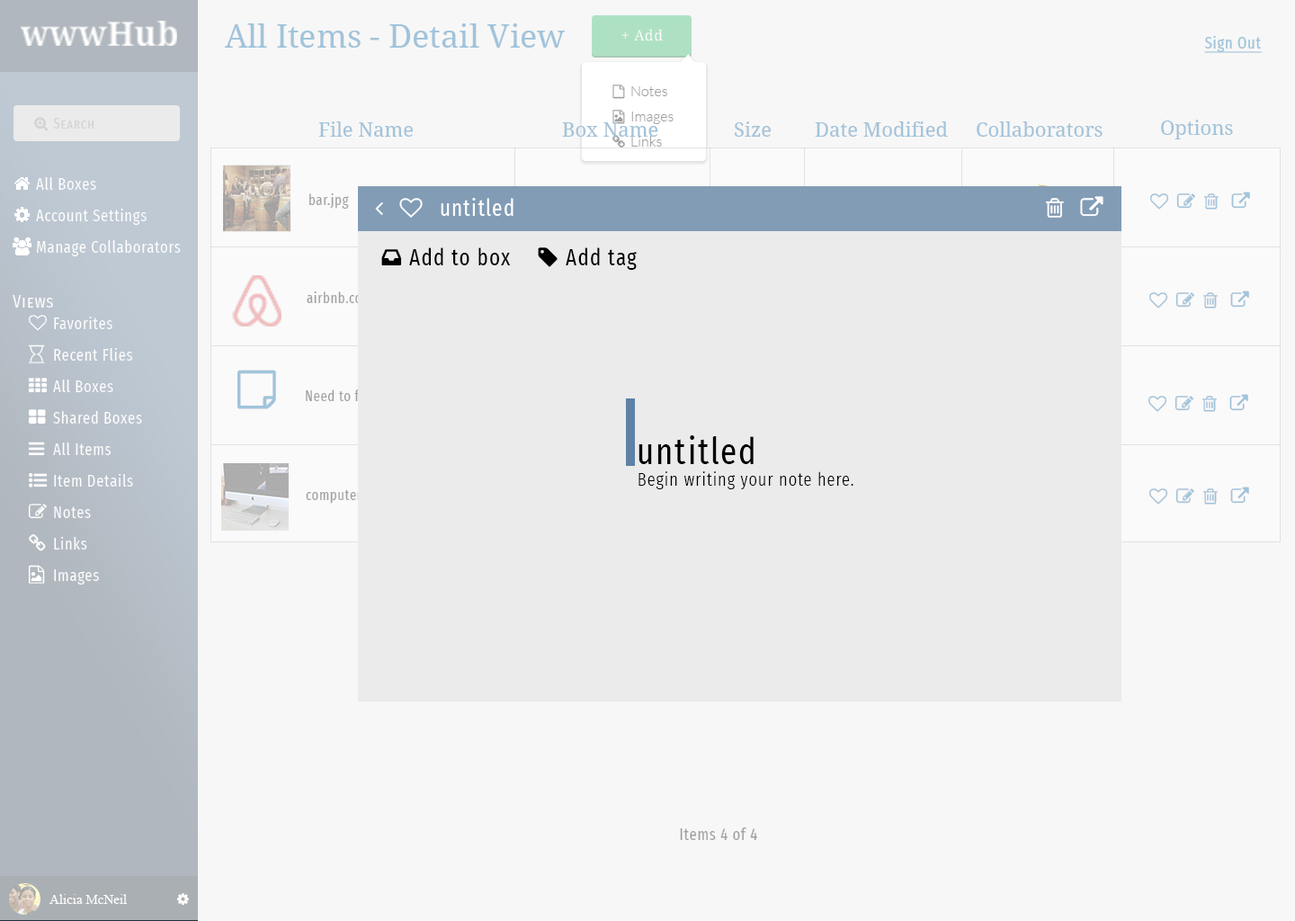
<style>
.page{position:relative;width:1295px;height:921px;background:#f7f7f7}
.page>*{position:absolute;margin:0}
.t1{font:32.4px "DroidSerif";color:#9fc4dc}
.t2{font:14.4px "DroidSerif";letter-spacing:0.04em;color:#ffffff}
.t3{font:14.4px/25.2px "Lato-Light";color:#9f9f9f}
.t4{font:19.8px "DroidSerif";color:#9fc4dc}
.t5{font:14.4px "FiraSansExtraCondensed-Regular";letter-spacing:0.04em;color:#9f9f9f}
.t6{font:22.5px "FiraSansExtraCondensed-Regular";letter-spacing:0.05em;color:#ffffff}
.t7{font:22.5px "FiraSansExtraCondensed-Regular";letter-spacing:0.05em;color:#000000}
.t8{font:14.4px "FiraSansExtraCondensed-Regular";letter-spacing:0.04em}
.t9{font:36px "FiraSansExtraCondensed-Regular";letter-spacing:0.05em;color:#000000}
.t10{font:18px "FiraSansExtraCondensed-Light";letter-spacing:0.05em;color:#000000}
.t11{font:16.2px "FiraSansExtraCondensed-Regular";letter-spacing:0.04em;color:#9f9f9f}
.t12{font:13.5px "TimesNewRomanPSMT";color:#ffffff}
</style>
<div class="page">
<p class="t1" style="left:225px;top:23px;width:340px;height:25px">All Items - Detail View</p>
<p class="t2" style="left:621px;top:29px;width:42px;height:12px">+ Add</p>
<p class="t3" style="left:631px;top:86px;width:43px;height:61px">Notes<br>Images<br>Links</p>
<p class="t4" style="left:318px;top:121px;width:95px;height:16px">File Name</p>
<p class="t4" style="left:562px;top:122px;width:96px;height:15px">Box Name</p>
<p class="t4" style="left:734px;top:121px;width:37px;height:16px">Size</p>
<p class="t4" style="left:815px;top:121px;width:133px;height:16px">Date Modified</p>
<p class="t4" style="left:977px;top:121px;width:125px;height:16px">Collaborators</p>
<p class="t4" style="left:1161px;top:120px;width:72px;height:19px">Options</p>
<p class="t5" style="left:309px;top:193px;width:40px;height:16px">bar.jpg</p>
<p class="t6" style="left:441px;top:198px;width:72px;height:18px">untitled</p>
<p class="t7" style="left:409px;top:247px;width:102px;height:18px">Add to box</p>
<p class="t7" style="left:566px;top:247px;width:71px;height:23px">Add tag</p>
<p class="t5" style="left:307px;top:291px;width:65px;height:12px">airbnb.com</p>
<p class="t8" style="left:306px;top:389px;width:137px;height:16px">Need to find a designer</p>
<p class="t9" style="left:638px;top:435px;width:116px;height:29px">untitled</p>
<p class="t10" style="left:638px;top:471px;width:215px;height:18px">Begin writing your note here.</p>
<p class="t8" style="left:306px;top:490px;width:81px;height:14px">computer.png</p>
<p class="t11" style="left:680px;top:827px;width:77px;height:13px">Items 4 of 4</p>
<p class="t12" style="left:49px;top:894px;width:78px;height:10px">Alicia McNeil</p>
</div>
